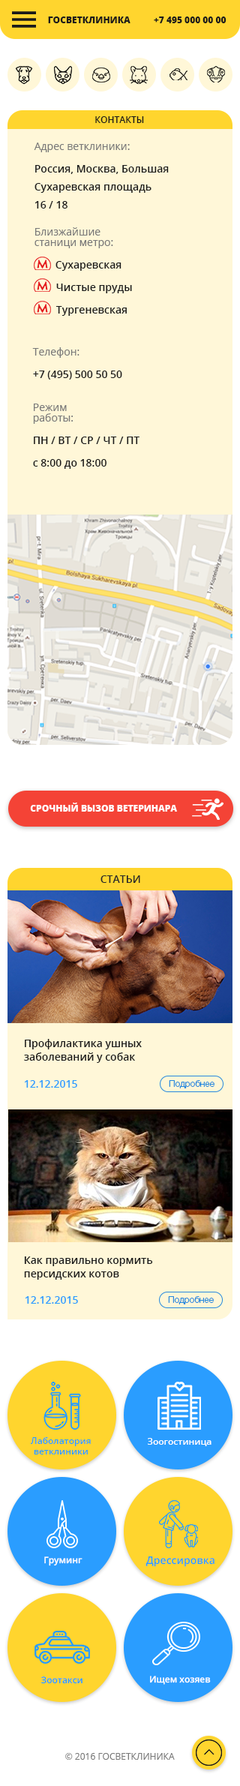
<style>
.page{position:relative;width:240px;height:1786px;background:#fff7d8}
.page>*{position:absolute;margin:0}
.t1{font:9px "OpenSans-Extrabold";color:#1b1b1b}
.t2{font:9px "OpenSans-Semibold";color:#1a1a1a}
.t3{font:10.5px/22.5px "OpenSans-Semibold";color:#1a1a1a}
.t4{font:10.5px/10.5px "OpenSans";color:#797979}
.t5{font:10.5px/18px "OpenSans-Semibold";color:#1a1a1a}
.t6{font:9px "OpenSans-Extrabold";color:#ffffff}
.t7{font:10.5px "OpenSans-Semibold";color:#292929}
.t8{font:10.5px/13.5px "OpenSans-Semibold";color:#1a1a1a}
.t9{font:10.5px "OpenSans-Semibold";color:#2a9dff}
.t10{font:9px "HelveticaNeueCyr-Light";color:#2589de}
.t11{font:9px/10.5px "OpenSans-Semibold";color:#2a9dff}
.t12{font:9px "OpenSans-Semibold";color:#ffffff}
.t13{font:9px "OpenSans-Semibold";color:#2a9dff}
.t14{font:9px "OpenSans";color:#797979}
</style>
<div class="page">
<p class="t1" style="left:48px;top:16px;width:178px;height:7px">ГОСВЕТКЛИНИКА          +7 495 000 00 00</p>
<p class="t2" style="left:95px;top:116px;width:49px;height:7px">КОНТАКТЫ</p>
<p class="t3" style="left:34px;top:142px;width:135px;height:174px"><span class="t4">Адрес ветклиники:<br></span>Россия, Москва, Большая<br><span class="t5">Сухаревская площадь<br>16 / 18<br><br></span><span class="t4">Близжайшие <br>станици метро:<br>      </span>Сухаревская<br>        Чистые пруды<br>        Тургеневская</p>
<p class="t3" style="left:32px;top:347px;width:107px;height:122px"><span class="t4">Телефон:<br></span>+7 (495) 500 50 50<br><br><span class="t4">Режим<br>работы:<br></span>ПН / ВТ / СР / ЧТ / ПТ<br>с 8:00 до 18:00</p>
<p class="t6" style="left:30px;top:802px;width:147px;height:9px">СРОЧНЫЙ ВЫЗОВ ВЕТЕРИНАРА</p>
<p class="t7" style="left:100px;top:875px;width:40px;height:8px">СТАТЬИ</p>
<p class="t8" style="left:24px;top:1039px;width:118px;height:24px">Профилактика ушных <br>заболеваний у собак</p>
<p class="t9" style="left:24px;top:1080px;width:53px;height:7px">12.12.2015</p>
<p class="t10" style="left:169px;top:1080px;width:45px;height:8px">Подробнее</p>
<p class="t8" style="left:24px;top:1256px;width:129px;height:23px">Как правильно кормить <br>персидских котов</p>
<p class="t9" style="left:25px;top:1296px;width:53px;height:7px">12.12.2015</p>
<p class="t10" style="left:168px;top:1296px;width:46px;height:8px">Подробнее</p>
<p class="t11" style="left:30px;top:1437px;width:61px;height:17px;text-align:center">Лаболатория<br>ветклиники</p>
<p class="t12" style="left:148px;top:1438px;width:63px;height:8px">Зоогостиница</p>
<p class="t12" style="left:44px;top:1556px;width:38px;height:10px">Груминг</p>
<p class="t9" style="left:145px;top:1555px;width:69px;height:12px">Дрессировка</p>
<p class="t13" style="left:41px;top:1676px;width:41px;height:8px">Зоотакси</p>
<p class="t12" style="left:150px;top:1675px;width:61px;height:9px">Ищем хозяев</p>
<p class="t14" style="left:65px;top:1753px;width:110px;height:6px">© 2016 ГОСВЕТКЛИНИКА</p>
</div>
